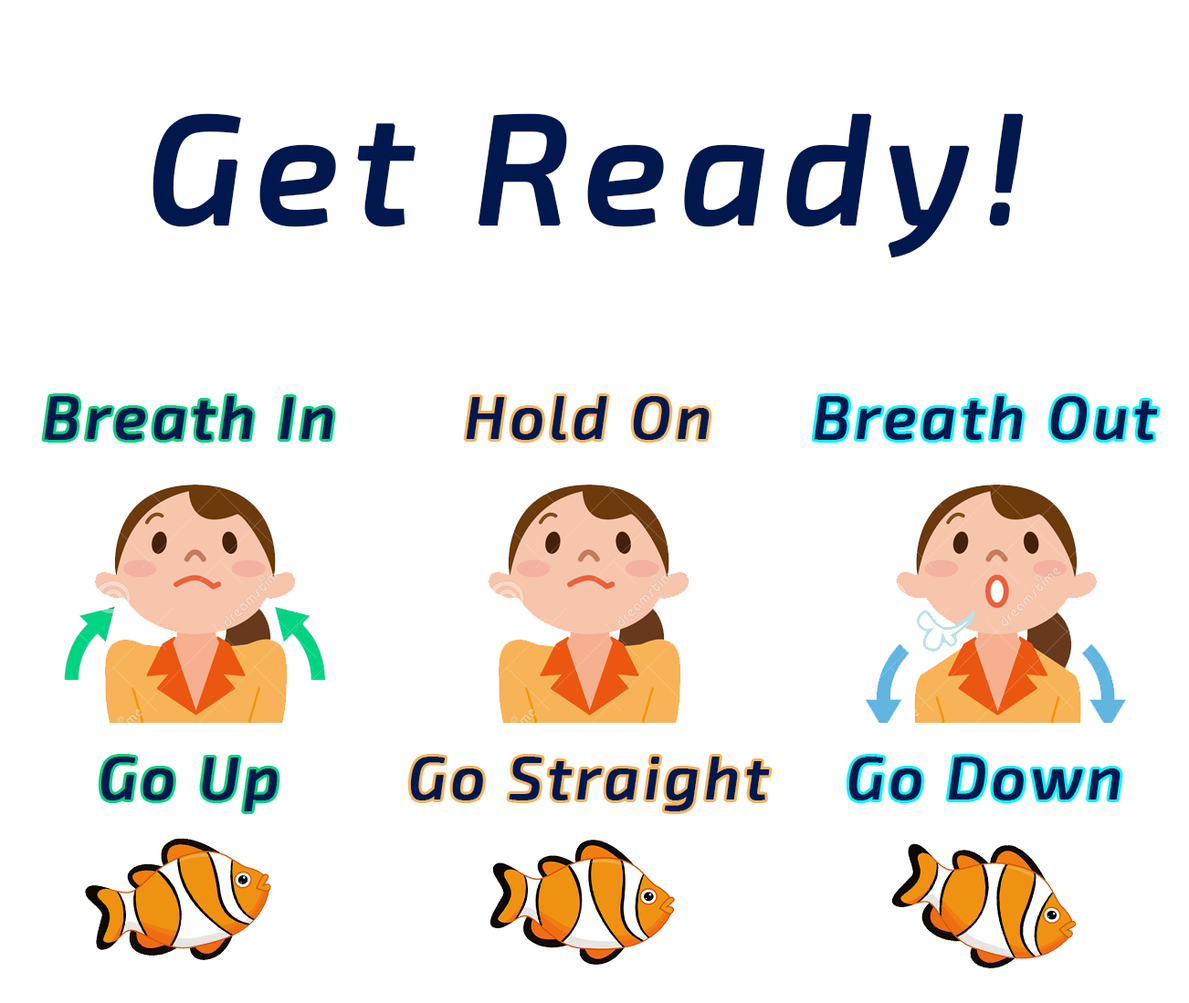
<style>
.page{position:relative;width:1189px;height:1003px;background:#ffffff}
.page>*{position:absolute;margin:0}
.t1{font:155px "Exo2-MediumItalic";letter-spacing:0.06em;color:#00184e;font-weight:bold}
.t2{font:60.1px "Exo2-MediumItalic";letter-spacing:0.06em;color:#00184e;font-weight:bold}
</style>
<div class="page">
<p class="t1" style="left:152px;top:113px;width:871px;height:145px">Get Ready!</p>
<p class="t2" style="left:44px;top:396px;width:289px;height:416px;text-align:center">Breath In<br><br> <br><br><br>Go Up</p>
<p class="t2" style="left:410px;top:396px;width:360px;height:416px;text-align:center">Hold On<br><br> <br><br><br>Go Straight</p>
<p class="t2" style="left:813px;top:396px;width:345px;height:405px;text-align:center">Breath Out<br><br> <br><br><br>Go Down</p>
</div>
